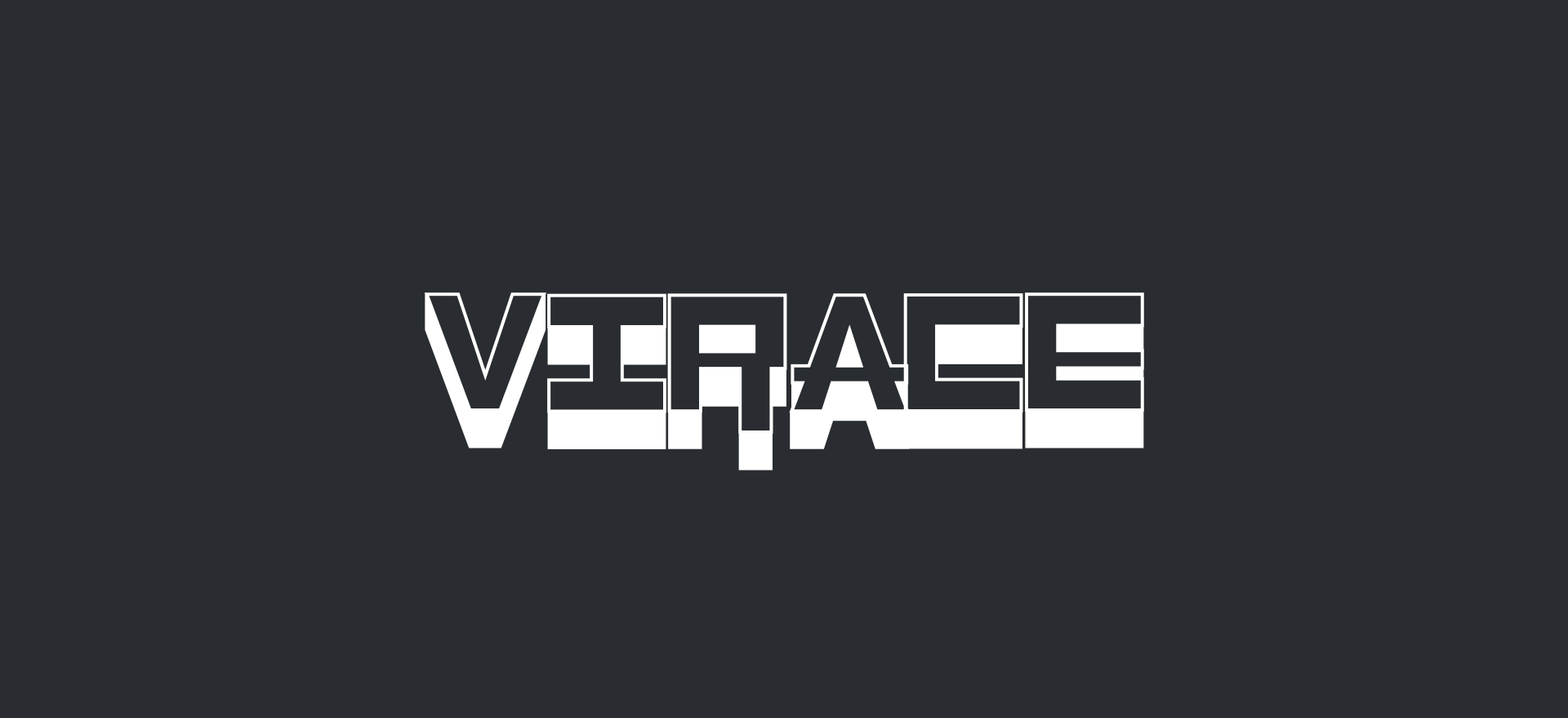
<style>
.page{position:relative;width:1568px;height:718px;background:#292d31}
.page>*{position:absolute;margin:0}
.t1{font:122.5px "RaseGPL-Outline";color:#ffffff}
</style>
<div class="page">
<p class="t1" style="left:424px;top:292px;width:720px;height:178px">VIRACE</p>
</div>
